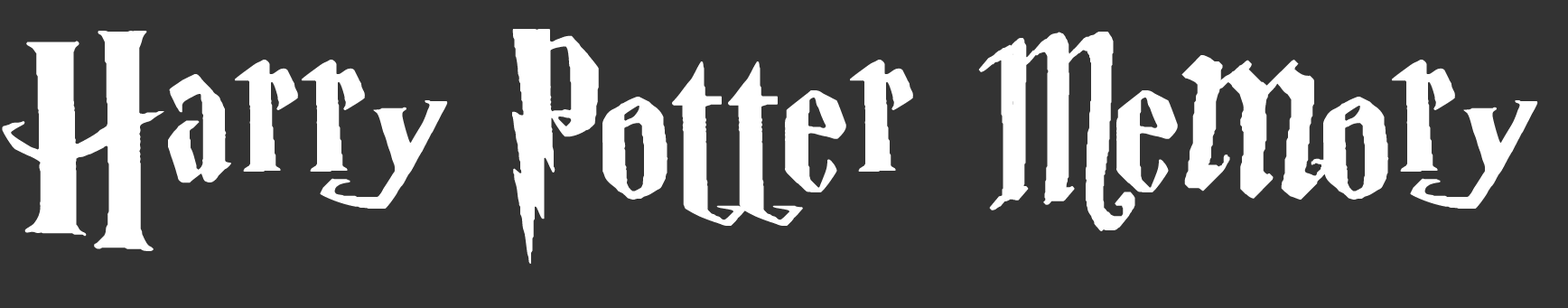
<style>
.page{position:relative;width:1568px;height:308px;background:#333333}
.page>*{position:absolute;margin:0}
.t1{font:188.2px "ParryHotter";color:#ffffff}
.t2{font:225.8px "ParryHotter";color:#ffffff}
.t3{font:150.5px "ParryHotter";color:#ffffff}
</style>
<div class="page">
<p class="t1" style="left:2px;top:29px;width:1536px;height:235px"><span class="t2">H</span>arry Potter <span class="t3">M</span>emory</p>
</div>
